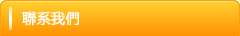
<style>
.page{position:relative;width:240px;height:36px}
.page>*{position:absolute;margin:0}
.t1{font:14px "MicrosoftYaHei";color:#ffffff;font-weight:bold}
</style>
<div class="page">
<p class="t1" style="left:22px;top:11px;width:57px;height:15px">聯系我們</p>
</div>
